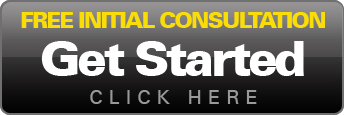
<style>
.page{position:relative;width:344px;height:116px}
.page>*{position:absolute;margin:0}
.t1{font:22.1px/40px "UniversLT-Black";letter-spacing:-0.075em;color:#fadd07}
.t2{font:49.1px/48px "UniversLT-Black";letter-spacing:-0.075em;color:#ffffff}
.t3{font:20px/28px "UniversLT";letter-spacing:0.3em;color:#999999;text-transform:uppercase}
</style>
<div class="page">
<p class="t1" style="left:21px;top:12px;width:304px;height:92px;text-align:center">FREE INITIAL CONSULTATION<br><span class="t2">Get Started<br></span><span class="t3">Click Here</span></p>
</div>
